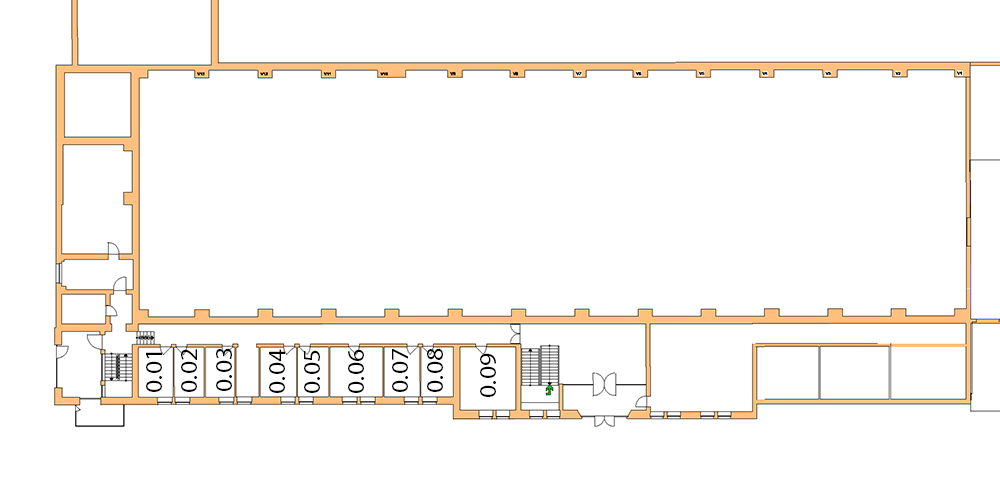
<style>
.page{position:relative;width:1000px;height:480px;background:#ffffff}
.page>*{position:absolute;margin:0}
.t1{font:23.3px "MyriadPro-Regular";color:#000000;scale:1.11 1}
</style>
<div class="page">
<p class="t1" style="left:146px;top:352px;width:16px;height:40px;rotate:-90deg">0.01</p>
<p class="t1" style="left:181px;top:349px;width:16px;height:43px;rotate:-90deg">0.02</p>
<p class="t1" style="left:216px;top:348px;width:16px;height:43px;rotate:-90deg">0.03</p>
<p class="t1" style="left:269px;top:349px;width:16px;height:44px;rotate:-90deg">0.04</p>
<p class="t1" style="left:304px;top:350px;width:16px;height:43px;rotate:-90deg">0.05</p>
<p class="t1" style="left:348px;top:349px;width:16px;height:44px;rotate:-90deg">0.06</p>
<p class="t1" style="left:392px;top:349px;width:16px;height:43px;rotate:-90deg">0.07</p>
<p class="t1" style="left:427px;top:348px;width:16px;height:44px;rotate:-90deg">0.08</p>
<p class="t1" style="left:480px;top:353px;width:16px;height:44px;rotate:-90deg">0.09</p>
</div>
